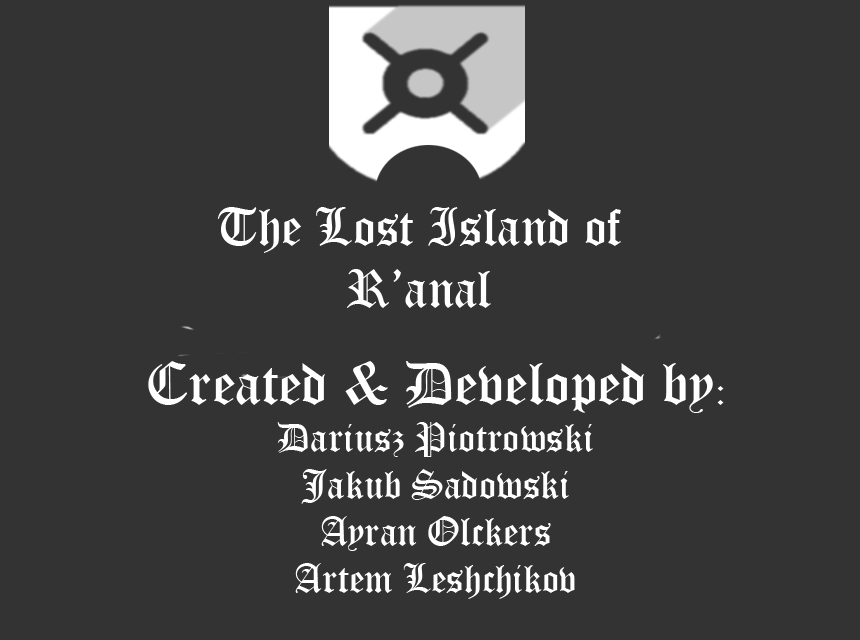
<style>
.page{position:relative;width:860px;height:640px;background:#333333}
.page>*{position:absolute;margin:0}
.t1{font:52px "OldEnglishTextMT";color:#ffffff}
.t2{font:39px "OldEnglishTextMT";color:#ffffff}
.t3{font:58.9px "OldEnglishTextMT";color:#ffffff}
</style>
<div class="page">
<p class="t1" style="left:217px;top:207px;width:404px;height:101px;text-align:center">The Lost Island of<br>R’anal</p>
<p class="t2" style="left:148px;top:361px;width:576px;height:238px;text-align:center"><span class="t3">Created &amp; Developed by</span>:<br>Dariusz Piotrowski<br>Jakub Sadowski<br>Ayran Olckers<br>Artem Leshchikov</p>
</div>
